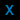
<style>
.page{position:relative;width:20px;height:20px;background:#000000}
.page>*{position:absolute;margin:0}
.t1{font:18px "ArialMT";color:#0080c0}
</style>
<div class="page">
<p class="t1" style="left:5px;top:5px;width:9px;height:10px">x</p>
</div>
